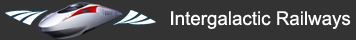
<style>
.page{position:relative;width:356px;height:40px;background:#333333}
.page>*{position:absolute;margin:0}
.t1{font:18.8px "ArialMT";color:#ffffff}
</style>
<div class="page">
<p class="t1" style="left:171px;top:11px;width:180px;height:18px">Intergalactic Railways</p>
</div>
